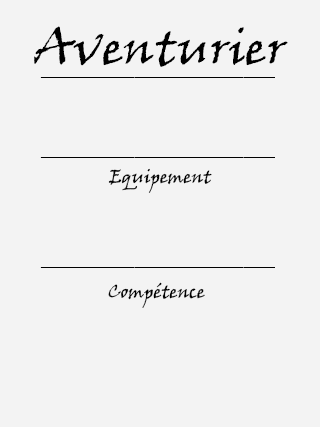
<style>
.page{position:relative;width:320px;height:427px;background:#f3f3f3}
.page>*{position:absolute;margin:0}
.t1{font:48px "VinerHandITC";color:#000000}
.t2{font:14px "ArialMT";color:#000000}
.t3{font:18px "VinerHandITC";color:#000000}
</style>
<div class="page">
<p class="t1" style="left:34px;top:26px;width:254px;height:41px">Aventurier</p>
<p class="t2" style="left:40px;top:77px;width:235px;height:1px">______________________________</p>
<p class="t2" style="left:40px;top:157px;width:235px;height:1px">______________________________</p>
<p class="t3" style="left:108px;top:168px;width:104px;height:25px">Equipement</p>
<p class="t2" style="left:40px;top:267px;width:235px;height:1px">______________________________</p>
<p class="t3" style="left:108px;top:282px;width:97px;height:26px">Compétence</p>
</div>
